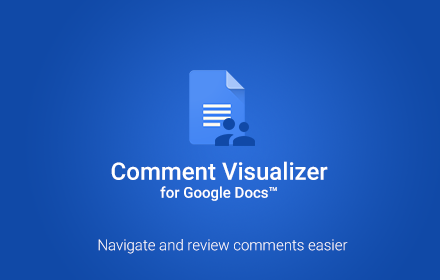
<style>
.page{position:relative;width:440px;height:280px}
.page>*{position:absolute;margin:0}
.t1{font:24px "Roboto-Medium";color:#ffffff}
.t2{font:15px "Roboto-Medium";color:#ffffff}
.t3{font:15px "Roboto-Light";color:#ffffff}
</style>
<div class="page">
<p class="t1" style="left:111px;top:161px;width:217px;height:40px;text-align:center">Comment Visualizer<br><span class="t2">for Google Docs™</span></p>
<p class="t3" style="left:98px;top:239px;width:250px;height:15px">Navigate and review comments easier</p>
</div>
